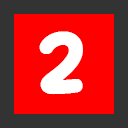
<style>
.page{position:relative;width:128px;height:128px;background:#ff0000}
.page>*{position:absolute;margin:0}
.t1{font:96.2px "Mabook";letter-spacing:0.075em;color:#ffffff}
</style>
<div class="page">
<p class="t1" style="left:39px;top:31px;width:44px;height:64px">2</p>
</div>
